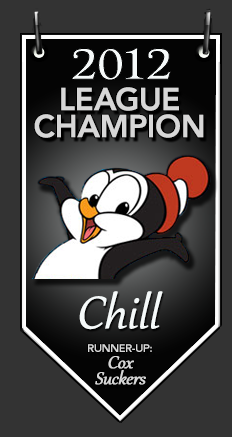
<style>
.page{position:relative;width:232px;height:437px;background:#333333}
.page>*{position:absolute;margin:0}
.t1{font:45px "Marion-Regular";letter-spacing:-0.025em;color:#f6fafa;font-weight:bold;scale:1.2 1}
.t2{font:31px/27px "Avenir-Heavy";letter-spacing:-0.025em;color:#d7d7d7;font-weight:bold}
.t3{font:55px "Gabriola";letter-spacing:-0.025em;color:#f6fafa;font-weight:bold;font-style:italic}
.t4{font:21px/16px "Gabriola";letter-spacing:-0.025em;color:#d7d7d7;font-weight:bold;font-style:italic}
.t5{font:11px/16px "Avenir-Heavy";letter-spacing:-0.025em;color:#d7d7d7}
</style>
<div class="page">
<p class="t1" style="left:72px;top:48px;width:99px;height:32px">2012</p>
<p class="t2" style="left:34px;top:87px;width:170px;height:51px;text-align:center">LEAGUE<br>CHAMPION</p>
<p class="t3" style="left:79px;top:291px;width:84px;height:39px">Chill</p>
<p class="t4" style="left:88px;top:344px;width:64px;height:41px;text-align:center"><span class="t5">RUNNER-UP:<br></span>Cox<br>Suckers</p>
</div>
